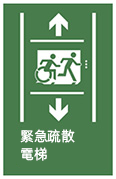
<style>
.page{position:relative;width:116px;height:179px;background:#487c4c}
.page>*{position:absolute;margin:0}
.t1{font:14px/18px "AlibabaPuHuiTiR";color:#ffffff}
</style>
<div class="page">
<p class="t1" style="left:20px;top:129px;width:55px;height:32px">緊急疏散<br>電梯</p>
</div>
